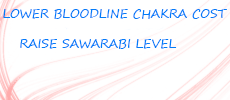
<style>
.page{position:relative;width:230px;height:100px;background:#ffffff}
.page>*{position:absolute;margin:0}
.t1{font:12px "SegoePrint";color:#027cf9}
</style>
<div class="page">
<p class="t1" style="left:3px;top:9px;width:224px;height:10px">LOWER BLOODLINE CHAKRA COST</p>
<p class="t1" style="left:20px;top:39px;width:157px;height:10px">RAISE SAWARABI LEVEL</p>
</div>
